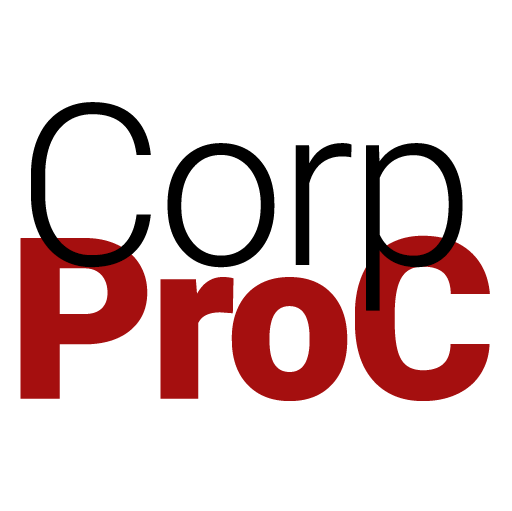
<style>
.page{position:relative;width:512px;height:511px;background:#ffffff}
.page>*{position:absolute;margin:0}
.t1{font:225.3px "Roboto-Light";letter-spacing:-0.05em;color:#000000;font-weight:bold}
.t2{font:225.3px "Roboto-Black";letter-spacing:-0.05em;color:#a50f0f;font-weight:bold}
</style>
<div class="page">
<p class="t1" style="left:31px;top:102px;width:432px;height:209px">Corp</p>
<p class="t2" style="left:20px;top:235px;width:470px;height:166px">ProC</p>
</div>
